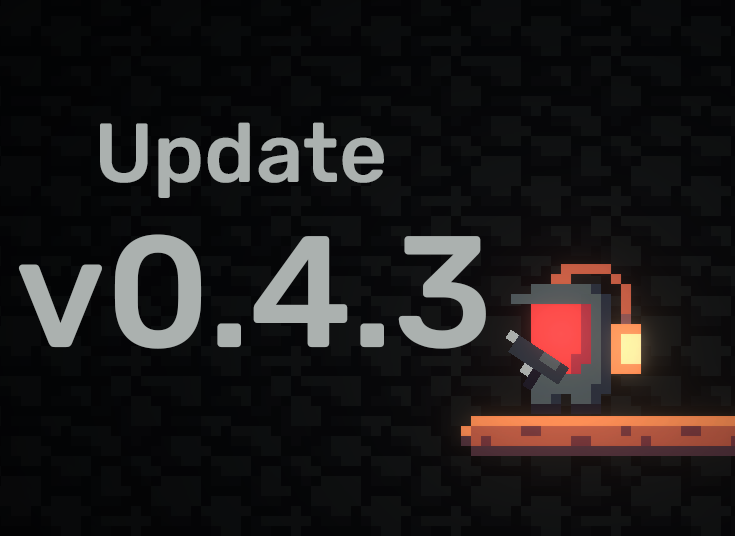
<style>
.page{position:relative;width:735px;height:536px}
.page>*{position:absolute;margin:0}
.t1{font:83.6px "Rubik-Medium";color:#abb1af}
.t2{font:158.3px "Rubik-Medium";color:#abb1af}
</style>
<div class="page">
<p class="t1" style="left:100px;top:122px;width:284px;height:76px">Update</p>
<p class="t2" style="left:18px;top:234px;width:468px;height:115px">v0.4.3</p>
</div>
